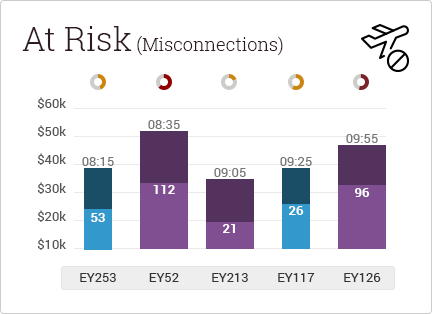
<style>
.page{position:relative;width:432px;height:314px;background:#ffffff}
.page>*{position:absolute;margin:0}
.t1{font:18px "RobotoSlab-Light";color:#2f1b1f}
.t2{font:33px "RobotoSlab-Light";color:#2f1b1f}
.t3{font:13px "Roboto-Regular";color:#555555}
.t4{font:13px "Roboto-Regular";color:#767676}
.t5{font:13px "Roboto-Bold";color:#ffffff}
.t6{font:13px "Roboto-Regular";color:#333333}
</style>
<div class="page">
<p class="t1" style="left:22px;top:26px;width:261px;height:30px"><span class="t2">At Risk</span> (Misconnections)</p>
<p class="t3" style="left:37px;top:97px;width:29px;height:12px">$60k</p>
<p class="t3" style="left:37px;top:125px;width:29px;height:12px">$50k</p>
<p class="t4" style="left:148px;top:120px;width:32px;height:9px">08:35</p>
<p class="t4" style="left:346px;top:134px;width:32px;height:9px">09:55</p>
<p class="t3" style="left:37px;top:153px;width:29px;height:12px">$40k</p>
<p class="t4" style="left:82px;top:157px;width:32px;height:9px">08:15</p>
<p class="t4" style="left:280px;top:157px;width:32px;height:9px">09:25</p>
<p class="t4" style="left:214px;top:168px;width:32px;height:9px">09:05</p>
<p class="t3" style="left:37px;top:182px;width:29px;height:12px">$30k</p>
<p class="t5" style="left:153px;top:185px;width:22px;height:9px">112</p>
<p class="t5" style="left:355px;top:188px;width:15px;height:9px">96</p>
<p class="t5" style="left:289px;top:206px;width:15px;height:9px">26</p>
<p class="t3" style="left:37px;top:210px;width:29px;height:12px">$20k</p>
<p class="t5" style="left:91px;top:213px;width:14px;height:9px">53</p>
<p class="t5" style="left:223px;top:224px;width:12px;height:9px">21</p>
<p class="t3" style="left:37px;top:238px;width:29px;height:12px">$10k</p>
<p class="t6" style="left:80px;top:273px;width:36px;height:9px">EY253</p>
<p class="t6" style="left:149px;top:273px;width:30px;height:9px">EY52</p>
<p class="t6" style="left:212px;top:273px;width:36px;height:9px">EY213</p>
<p class="t6" style="left:278px;top:273px;width:37px;height:9px">EY117</p>
<p class="t6" style="left:344px;top:273px;width:37px;height:9px">EY126</p>
</div>
